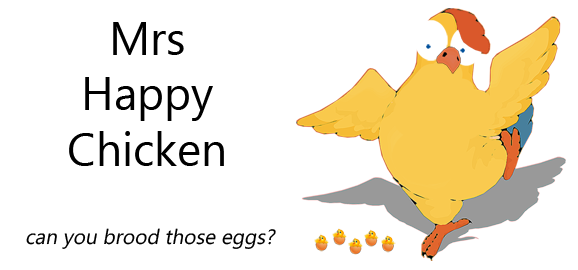
<style>
.page{position:relative;width:578px;height:270px;background:#ffffff}
.page>*{position:absolute;margin:0}
.t1{font:45.8px/25px "MicrosoftTaiLe";color:#000000}
.t2{font:20.8px "MicrosoftTaiLe";color:#000000;font-style:italic}
</style>
<div class="page">
<p class="t1" style="left:69px;top:22px;width:155px;height:144px;text-align:center">Mrs<br>Happy<br>Chicken</p>
<p class="t2" style="left:26px;top:228px;width:250px;height:21px">can you brood those eggs?</p>
</div>
